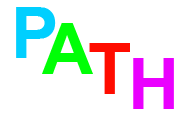
<style>
.page{position:relative;width:180px;height:120px;background:#ffffff}
.page>*{position:absolute;margin:0}
.t1{font:71.1px "Arial-BoldMT";color:#00cfff}
.t2{font:71.1px "Arial-BoldMT";color:#00ff06}
.t3{font:71.1px "Arial-BoldMT";color:#ff0c00}
.t4{font:71.1px "Arial-BoldMT";color:#ea00ff}
</style>
<div class="page">
<p class="t1" style="left:16px;top:7px;width:40px;height:51px">P</p>
<p class="t2" style="left:42px;top:23px;width:51px;height:51px">A</p>
<p class="t3" style="left:89px;top:43px;width:41px;height:51px">T</p>
<p class="t4" style="left:133px;top:58px;width:41px;height:51px">H</p>
</div>
